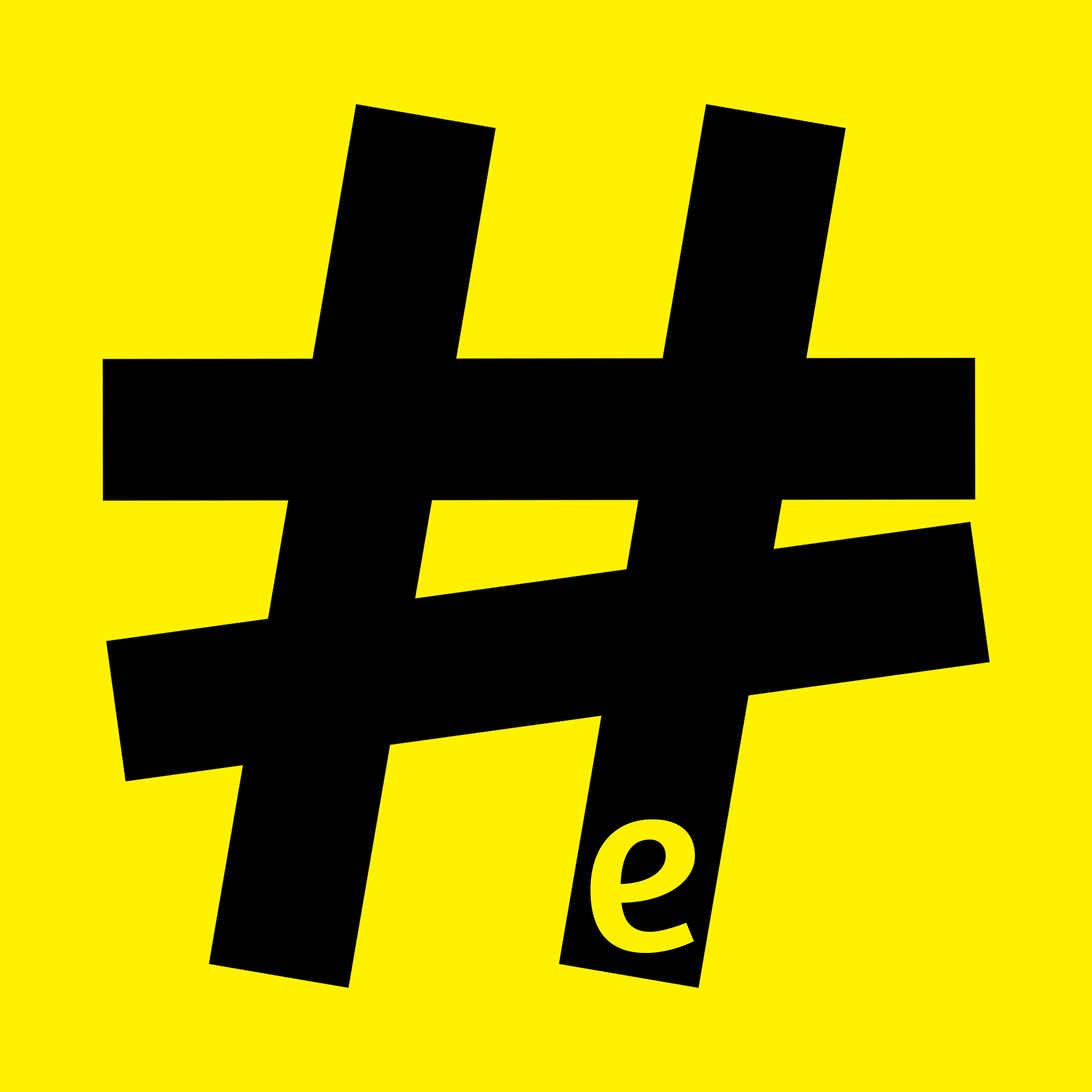
<style>
.page{position:relative;width:1092px;height:1092px;background:#fff200}
.page>*{position:absolute;margin:0}
.t1{font:257.9px "Amaranth-Regular";color:#fff200}
</style>
<div class="page">
<p class="t1" style="left:590px;top:819px;width:105px;height:134px">e</p>
</div>
